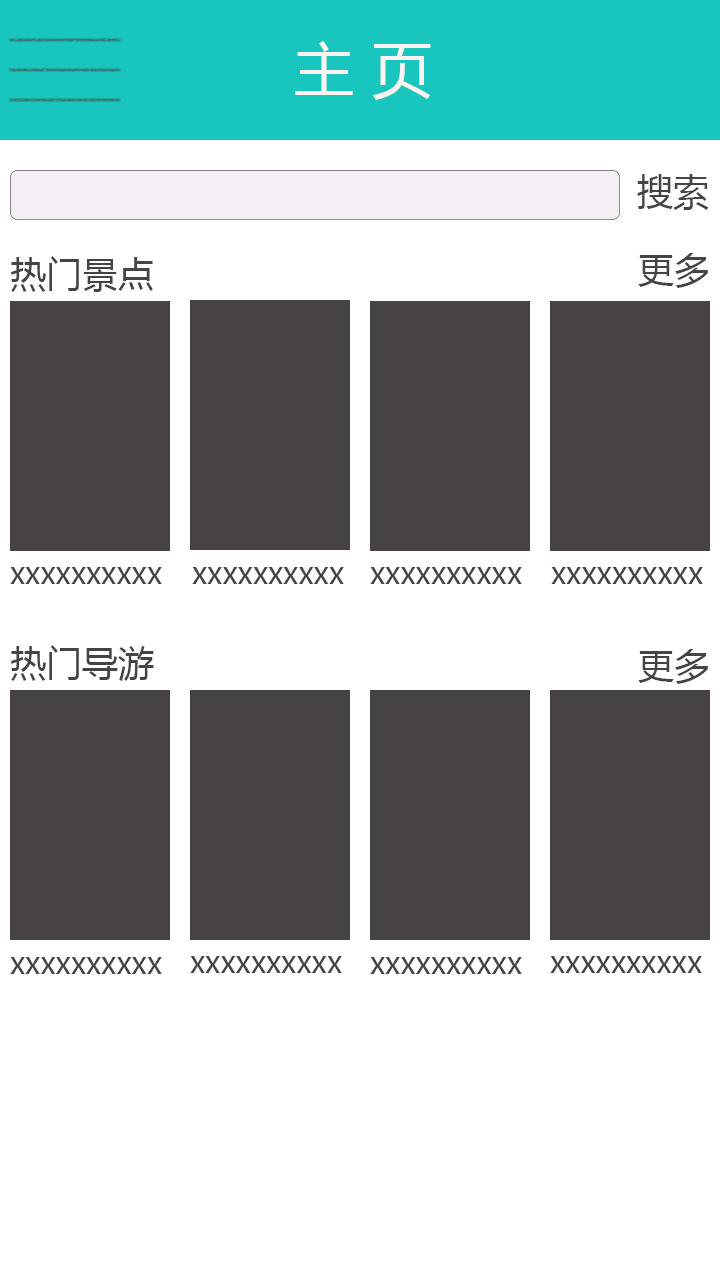
<style>
.page{position:relative;width:720px;height:1280px;background:#ffffff}
.page>*{position:absolute;margin:0}
.t1{font:60px "MicrosoftYaHei";color:#fcf4f2}
.t2{font:36px "MicrosoftYaHei";color:#474344}
.t3{font:30px "MicrosoftYaHei";color:#474344}
</style>
<div class="page">
<p class="t1" style="left:295px;top:41px;width:136px;height:59px">主 页</p>
<p class="t2" style="left:637px;top:174px;width:72px;height:36px">搜索</p>
<p class="t2" style="left:11px;top:256px;width:142px;height:36px">热门景点</p>
<p class="t2" style="left:638px;top:253px;width:70px;height:35px">更多</p>
<p class="t3" style="left:10px;top:567px;width:152px;height:17px">xxxxxxxxxx</p>
<p class="t3" style="left:192px;top:567px;width:152px;height:17px">xxxxxxxxxx</p>
<p class="t3" style="left:370px;top:567px;width:152px;height:17px">xxxxxxxxxx</p>
<p class="t3" style="left:551px;top:567px;width:152px;height:17px">xxxxxxxxxx</p>
<p class="t2" style="left:11px;top:645px;width:143px;height:36px">热门导游</p>
<p class="t2" style="left:638px;top:649px;width:70px;height:35px">更多</p>
<p class="t3" style="left:10px;top:957px;width:152px;height:17px">xxxxxxxxxx</p>
<p class="t3" style="left:190px;top:956px;width:152px;height:17px">xxxxxxxxxx</p>
<p class="t3" style="left:370px;top:957px;width:152px;height:17px">xxxxxxxxxx</p>
<p class="t3" style="left:550px;top:956px;width:152px;height:17px">xxxxxxxxxx</p>
</div>
